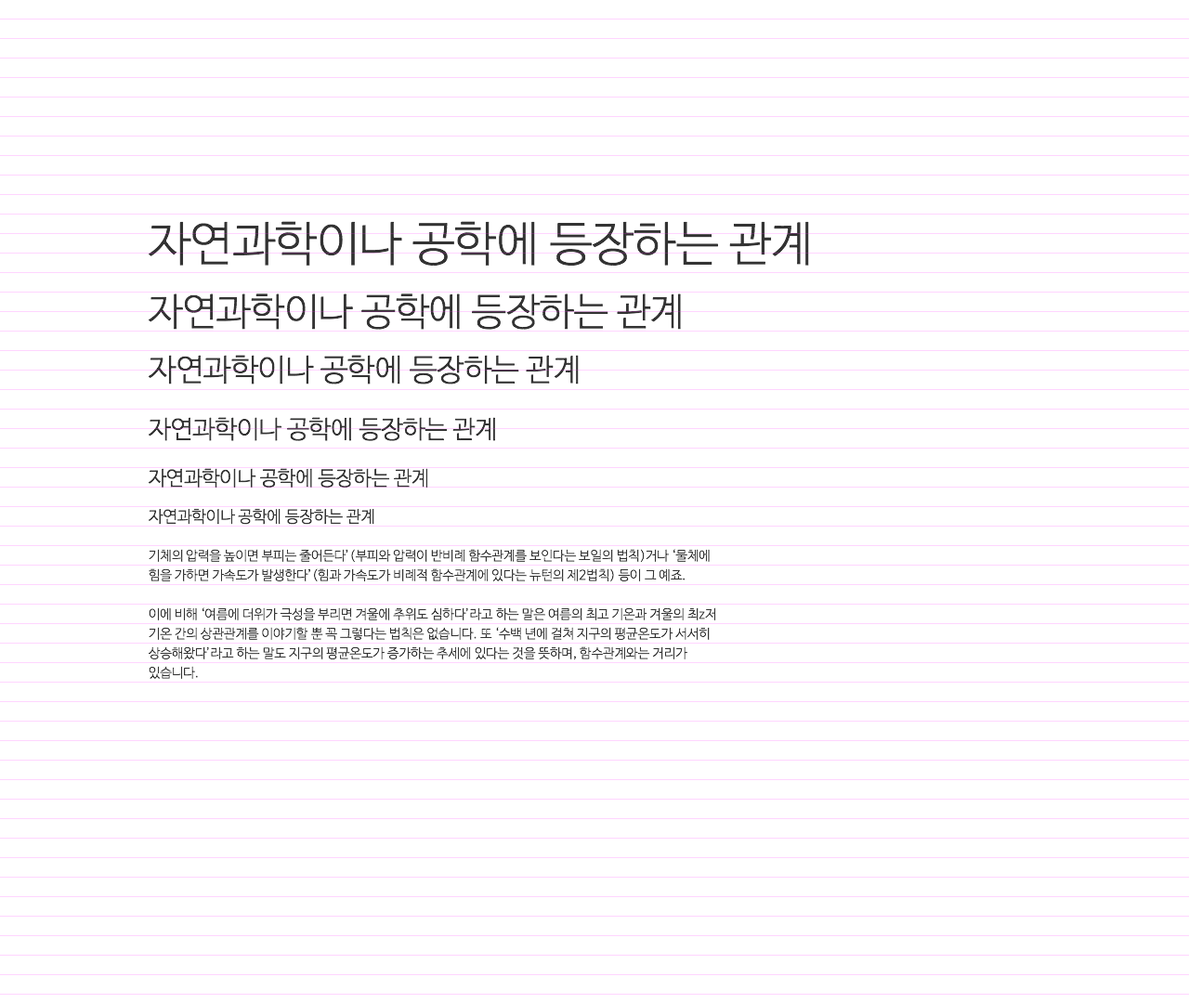
<style>
.page{position:relative;width:1189px;height:1003px;background:#ffffff}
.page>*{position:absolute;margin:0}
.t1{font:47.3px "NanumBarunGothicOTFLight";color:#333333}
.t2{font:38.1px "NanumBarunGothicOTFLight";color:#333333}
.t3{font:30.8px "NanumBarunGothicOTFLight";color:#333333}
.t4{font:24.8px "NanumBarunGothicOTFLight";color:#333333}
.t5{font:20px "NanumBarunGothicOTFLight";color:#333333}
.t6{font:16.1px "NanumBarunGothicOTFLight";color:#333333}
.t7{font:13px "NanumBarunGothicOTFLight";color:#333333}
</style>
<div class="page">
<p class="t1" style="left:149px;top:221px;width:660px;height:45px">자연과학이나 공학에 등장하는 관계</p>
<p class="t2" style="left:149px;top:293px;width:532px;height:37px">자연과학이나 공학에 등장하는 관계</p>
<p class="t3" style="left:149px;top:355px;width:430px;height:30px">자연과학이나 공학에 등장하는 관계</p>
<p class="t4" style="left:149px;top:417px;width:346px;height:24px">자연과학이나 공학에 등장하는 관계</p>
<p class="t5" style="left:149px;top:468px;width:279px;height:20px">자연과학이나 공학에 등장하는 관계</p>
<p class="t6" style="left:149px;top:508px;width:225px;height:17px">자연과학이나 공학에 등장하는 관계</p>
<p class="t7" style="left:149px;top:549px;width:567px;height:130px">기체의 압력을 높이면 부피는 줄어든다’(부피와 압력이 반비례 함수관계를 보인다는 보일의 법칙)거나 ‘물체에 힘을 가하면 가속도가 발생한다’(힘과 가속도가 비례적 함수관계에 있다는 뉴턴의 제2법칙) 등이 그 예죠.<br>이에 비해 ‘여름에 더위가 극성을 부리면 겨울에 추위도 심하다’라고 하는 말은 여름의 최고 기온과 겨울의 최z저 기온 간의 상관관계를 이야기할 뿐 꼭 그렇다는 법칙은 없습니다. 또 ‘수백 년에 걸쳐 지구의 평균온도가 서서히 상승해왔다’라고 하는 말도 지구의 평균온도가 증가하는 추세에 있다는 것을 뜻하며, 함수관계와는 거리가 있습니다.</p>
</div>
